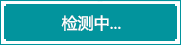
<style>
.page{position:relative;width:181px;height:46px;background:#02949d}
.page>*{position:absolute;margin:0}
.t1{font:16px "MicrosoftYaHeiUI";color:#ffffff}
</style>
<div class="page">
<p class="t1" style="left:61px;top:15px;width:60px;height:16px">检测中...</p>
</div>
